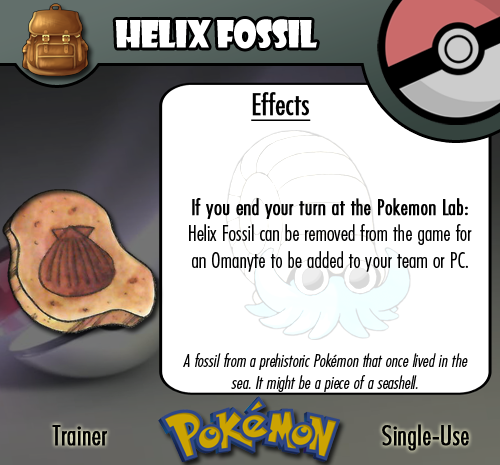
<style>
.page{position:relative;width:500px;height:465px;background:#ffffff}
.page>*{position:absolute;margin:0}
.t1{font:36.7px "ShowcardGothic-Reg";letter-spacing:-0.025em;color:#ffffff;scale:0.91 1}
.t2{font:22.2px "FuturaCondensedBQ-Light";color:#010101}
.t3{font:27.8px "FuturaCondensedBQ-Light";color:#010101;font-weight:bold}
.t4{font:30.6px "FuturaCondensedBQ-Light";color:#010101;font-weight:bold;text-decoration:underline}
.t5{font:22.2px "FuturaCondensedBQ-Light";color:#010101;font-weight:bold}
.t6{font:18.1px "FuturaCondensedBQ-Light";color:#010101;font-style:italic}
</style>
<div class="page">
<p class="t1" style="left:115px;top:19px;width:202px;height:30px">Helix Fossil</p>
<p class="t2" style="left:189px;top:92px;width:283px;height:180px"><span class="t3">  </span><span class="t4">Effects<br><br><br><br><br><br></span><span class="t5">If you end your turn at the Pokemon Lab: </span>Helix Fossil can be removed from the game for an Omanyte to be added to your team or PC.</p>
<p class="t6" style="left:183px;top:353px;width:285px;height:39px;text-align:center">A fossil from a prehistoric Pokémon that once lived in the sea. It might be a piece of a seashell.</p>
<p class="t3" style="left:52px;top:425px;width:55px;height:21px">Trainer</p>
<p class="t3" style="left:382px;top:424px;width:87px;height:27px">Single-Use</p>
</div>
